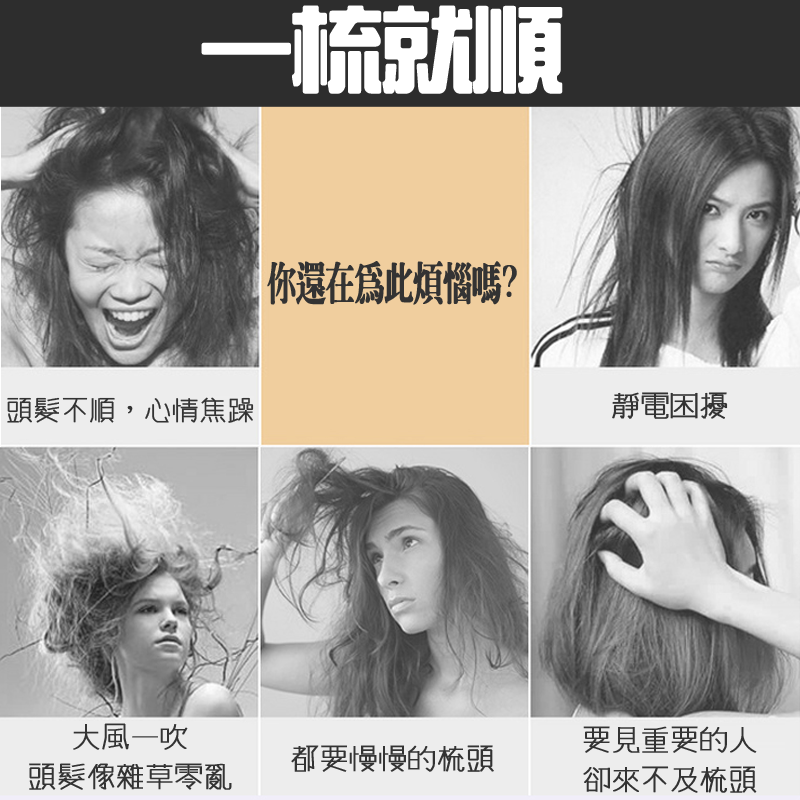
<style>
.page{position:relative;width:800px;height:800px}
.page>*{position:absolute;margin:0}
.t1{font:92.5px "HanWangZonYi";letter-spacing:-0.05em;color:#ffffff;font-weight:bold}
.t2{font:44.6px "HanWangMingHeavy";letter-spacing:-0.05em;color:#333333;font-weight:bold;scale:0.67 1}
.t3{font:28.3px "winman-tun33014";letter-spacing:-0.05em;color:#333333;font-weight:bold}
.t4{font:30px "winman-tun33014";letter-spacing:-0.05em;color:#333333;font-weight:bold}
.t5{font:30px/40px "winman-tun33014";letter-spacing:-0.05em;color:#333333;font-weight:bold}
</style>
<div class="page">
<p class="t1" style="left:201px;top:5px;width:362px;height:89px">一梳就順</p>
<p class="t2" style="left:267px;top:261px;width:250px;height:44px">你還在為此煩惱嗎?</p>
<p class="t3" style="left:7px;top:397px;width:247px;height:26px">頭髮不順，心情焦躁</p>
<p class="t4" style="left:612px;top:392px;width:116px;height:27px">靜電困擾</p>
<p class="t5" style="left:29px;top:723px;width:203px;height:67px;text-align:center">大風一吹<br>頭髮像雜草零亂</p>
<p class="t5" style="left:583px;top:726px;width:174px;height:67px">要見重要的人<br>卻來不及梳頭</p>
<p class="t4" style="left:291px;top:745px;width:203px;height:27px">都要慢慢的梳頭</p>
</div>
